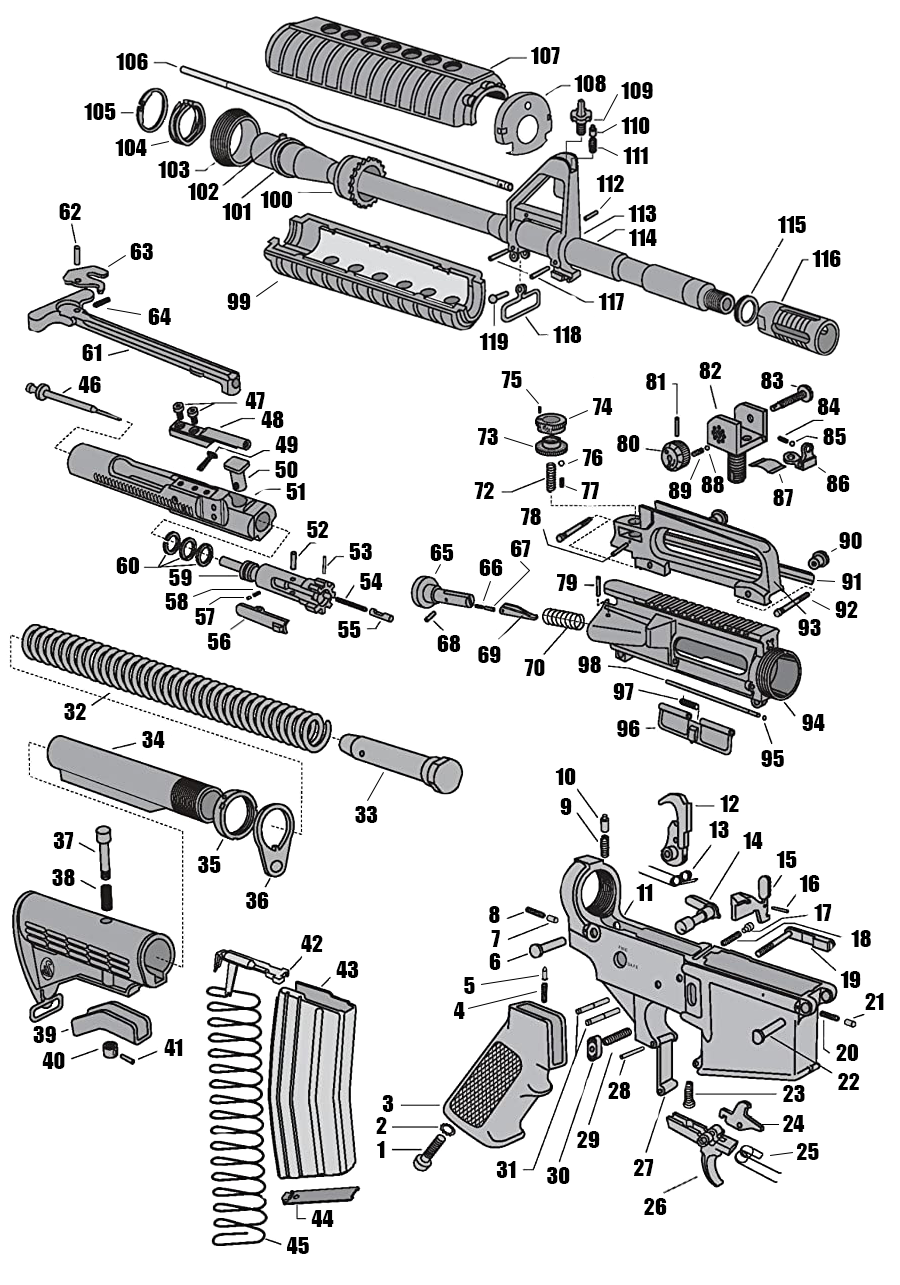
<style>
.page{position:relative;width:900px;height:1285px;background:#ffffff}
.page>*{position:absolute;margin:0}
.t1{font:22px "Impact";color:#000000}
</style>
<div class="page">
<p class="t1" style="left:116px;top:53px;width:32px;height:17px">106</p>
<p class="t1" style="left:531px;top:47px;width:29px;height:17px">107</p>
<p class="t1" style="left:574px;top:75px;width:32px;height:17px">108</p>
<p class="t1" style="left:621px;top:82px;width:32px;height:17px">109</p>
<p class="t1" style="left:84px;top:103px;width:32px;height:17px">105</p>
<p class="t1" style="left:621px;top:117px;width:29px;height:17px">110</p>
<p class="t1" style="left:115px;top:139px;width:32px;height:17px">104</p>
<p class="t1" style="left:623px;top:147px;width:25px;height:17px">111</p>
<p class="t1" style="left:158px;top:161px;width:32px;height:17px">103</p>
<p class="t1" style="left:188px;top:183px;width:31px;height:17px">102</p>
<p class="t1" style="left:596px;top:175px;width:28px;height:17px">112</p>
<p class="t1" style="left:260px;top:191px;width:32px;height:17px">100</p>
<p class="t1" style="left:59px;top:203px;width:22px;height:17px">62</p>
<p class="t1" style="left:222px;top:203px;width:29px;height:17px">101</p>
<p class="t1" style="left:628px;top:205px;width:29px;height:17px">113</p>
<p class="t1" style="left:778px;top:216px;width:28px;height:17px">115</p>
<p class="t1" style="left:629px;top:229px;width:28px;height:17px">114</p>
<p class="t1" style="left:130px;top:243px;width:23px;height:17px">63</p>
<p class="t1" style="left:812px;top:250px;width:29px;height:17px">116</p>
<p class="t1" style="left:227px;top:293px;width:24px;height:17px">99</p>
<p class="t1" style="left:598px;top:293px;width:26px;height:17px">117</p>
<p class="t1" style="left:148px;top:308px;width:23px;height:17px">64</p>
<p class="t1" style="left:553px;top:326px;width:29px;height:17px">118</p>
<p class="t1" style="left:479px;top:333px;width:29px;height:17px">119</p>
<p class="t1" style="left:82px;top:344px;width:20px;height:17px">61</p>
<p class="t1" style="left:699px;top:362px;width:23px;height:17px">82</p>
<p class="t1" style="left:78px;top:376px;width:23px;height:17px">46</p>
<p class="t1" style="left:501px;top:371px;width:21px;height:17px">75</p>
<p class="t1" style="left:646px;top:373px;width:19px;height:17px">81</p>
<p class="t1" style="left:761px;top:372px;width:23px;height:17px">83</p>
<p class="t1" style="left:245px;top:392px;width:20px;height:17px">47</p>
<p class="t1" style="left:593px;top:398px;width:20px;height:17px">74</p>
<p class="t1" style="left:817px;top:398px;width:23px;height:17px">84</p>
<p class="t1" style="left:261px;top:411px;width:23px;height:17px">48</p>
<p class="t1" style="left:275px;top:436px;width:23px;height:17px">49</p>
<p class="t1" style="left:478px;top:428px;width:20px;height:17px">73</p>
<p class="t1" style="left:617px;top:435px;width:23px;height:17px">80</p>
<p class="t1" style="left:823px;top:428px;width:23px;height:17px">85</p>
<p class="t1" style="left:582px;top:449px;width:21px;height:17px">76</p>
<p class="t1" style="left:275px;top:461px;width:23px;height:17px">50</p>
<p class="t1" style="left:286px;top:483px;width:19px;height:17px">51</p>
<p class="t1" style="left:474px;top:482px;width:20px;height:17px">72</p>
<p class="t1" style="left:581px;top:482px;width:18px;height:17px">77</p>
<p class="t1" style="left:668px;top:482px;width:24px;height:17px">89</p>
<p class="t1" style="left:701px;top:476px;width:23px;height:17px">88</p>
<p class="t1" style="left:826px;top:475px;width:24px;height:17px">86</p>
<p class="t1" style="left:773px;top:489px;width:20px;height:17px">87</p>
<p class="t1" style="left:521px;top:508px;width:20px;height:17px">78</p>
<p class="t1" style="left:307px;top:521px;width:22px;height:17px">52</p>
<p class="t1" style="left:839px;top:532px;width:23px;height:17px">90</p>
<p class="t1" style="left:349px;top:543px;width:23px;height:17px">53</p>
<p class="t1" style="left:430px;top:544px;width:24px;height:17px">65</p>
<p class="t1" style="left:511px;top:540px;width:20px;height:17px">67</p>
<p class="t1" style="left:116px;top:557px;width:23px;height:17px">60</p>
<p class="t1" style="left:169px;top:569px;width:23px;height:17px">59</p>
<p class="t1" style="left:479px;top:559px;width:24px;height:17px">66</p>
<p class="t1" style="left:360px;top:573px;width:23px;height:17px">54</p>
<p class="t1" style="left:557px;top:574px;width:20px;height:17px">79</p>
<p class="t1" style="left:842px;top:573px;width:19px;height:17px">91</p>
<p class="t1" style="left:165px;top:593px;width:23px;height:17px">58</p>
<p class="t1" style="left:835px;top:601px;width:23px;height:17px">92</p>
<p class="t1" style="left:195px;top:608px;width:20px;height:17px">57</p>
<p class="t1" style="left:338px;top:621px;width:23px;height:17px">55</p>
<p class="t1" style="left:798px;top:619px;width:23px;height:17px">93</p>
<p class="t1" style="left:207px;top:633px;width:24px;height:17px">56</p>
<p class="t1" style="left:437px;top:635px;width:24px;height:17px">68</p>
<p class="t1" style="left:478px;top:646px;width:23px;height:17px">69</p>
<p class="t1" style="left:524px;top:659px;width:21px;height:17px">70</p>
<p class="t1" style="left:578px;top:656px;width:23px;height:17px">98</p>
<p class="t1" style="left:613px;top:683px;width:21px;height:17px">97</p>
<p class="t1" style="left:64px;top:703px;width:22px;height:17px">32</p>
<p class="t1" style="left:617px;top:720px;width:23px;height:17px">96</p>
<p class="t1" style="left:802px;top:714px;width:23px;height:17px">94</p>
<p class="t1" style="left:142px;top:731px;width:23px;height:17px">34</p>
<p class="t1" style="left:761px;top:750px;width:23px;height:17px">95</p>
<p class="t1" style="left:555px;top:768px;width:21px;height:17px">10</p>
<p class="t1" style="left:560px;top:798px;width:12px;height:17px">9</p>
<p class="t1" style="left:720px;top:795px;width:19px;height:17px">12</p>
<p class="t1" style="left:355px;top:806px;width:23px;height:17px">33</p>
<p class="t1" style="left:709px;top:821px;width:20px;height:17px">13</p>
<p class="t1" style="left:53px;top:832px;width:21px;height:17px">37</p>
<p class="t1" style="left:743px;top:832px;width:20px;height:17px">14</p>
<p class="t1" style="left:198px;top:856px;width:23px;height:17px">35</p>
<p class="t1" style="left:776px;top:851px;width:21px;height:17px">15</p>
<p class="t1" style="left:52px;top:869px;width:23px;height:17px">38</p>
<p class="t1" style="left:799px;top:875px;width:21px;height:17px">16</p>
<p class="t1" style="left:246px;top:892px;width:23px;height:17px">36</p>
<p class="t1" style="left:636px;top:884px;width:17px;height:17px">11</p>
<p class="t1" style="left:814px;top:904px;width:18px;height:17px">17</p>
<p class="t1" style="left:489px;top:906px;width:11px;height:17px">8</p>
<p class="t1" style="left:301px;top:935px;width:22px;height:17px">42</p>
<p class="t1" style="left:491px;top:930px;width:9px;height:17px">7</p>
<p class="t1" style="left:851px;top:930px;width:20px;height:17px">18</p>
<p class="t1" style="left:489px;top:953px;width:12px;height:17px">6</p>
<p class="t1" style="left:336px;top:961px;width:23px;height:17px">43</p>
<p class="t1" style="left:464px;top:977px;width:11px;height:17px">5</p>
<p class="t1" style="left:840px;top:971px;width:21px;height:17px">19</p>
<p class="t1" style="left:865px;top:993px;width:19px;height:17px">21</p>
<p class="t1" style="left:454px;top:1002px;width:11px;height:17px">4</p>
<p class="t1" style="left:33px;top:1026px;width:23px;height:17px">39</p>
<p class="t1" style="left:164px;top:1039px;width:19px;height:17px">41</p>
<p class="t1" style="left:836px;top:1044px;width:22px;height:17px">20</p>
<p class="t1" style="left:42px;top:1052px;width:23px;height:17px">40</p>
<p class="t1" style="left:838px;top:1073px;width:22px;height:17px">22</p>
<p class="t1" style="left:608px;top:1082px;width:23px;height:17px">28</p>
<p class="t1" style="left:783px;top:1085px;width:22px;height:17px">23</p>
<p class="t1" style="left:382px;top:1095px;width:12px;height:17px">3</p>
<p class="t1" style="left:376px;top:1117px;width:11px;height:17px">2</p>
<p class="t1" style="left:783px;top:1115px;width:22px;height:17px">24</p>
<p class="t1" style="left:577px;top:1131px;width:23px;height:17px">29</p>
<p class="t1" style="left:377px;top:1141px;width:8px;height:17px">1</p>
<p class="t1" style="left:797px;top:1143px;width:22px;height:17px">25</p>
<p class="t1" style="left:496px;top:1161px;width:20px;height:17px">31</p>
<p class="t1" style="left:547px;top:1167px;width:23px;height:17px">30</p>
<p class="t1" style="left:634px;top:1159px;width:20px;height:17px">27</p>
<p class="t1" style="left:644px;top:1198px;width:23px;height:17px">26</p>
<p class="t1" style="left:311px;top:1210px;width:23px;height:17px">44</p>
<p class="t1" style="left:287px;top:1237px;width:22px;height:17px">45</p>
</div>
